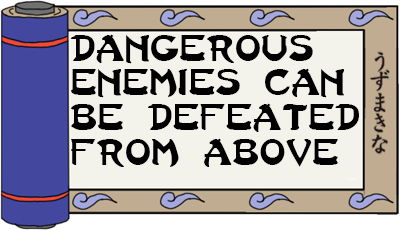
<style>
.page{position:relative;width:400px;height:230px;background:#f3f2eb}
.page>*{position:absolute;margin:0}
.t1{font:28.9px "LastNinja";color:#000000}
</style>
<div class="page">
<p class="t1" style="left:71px;top:34px;width:288px;height:133px">dangerous<br>enemies can<br>be defeated<br>from above</p>
</div>
